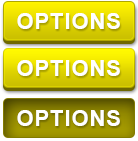
<style>
.page{position:relative;width:138px;height:141px}
.page>*{position:absolute;margin:0}
.t1{font:21.7px "Arial-BoldMT";letter-spacing:0.05em;color:#ffffff;text-transform:uppercase}
</style>
<div class="page">
<p class="t1" style="left:17px;top:13px;width:103px;height:16px">options</p>
<p class="t1" style="left:17px;top:60px;width:103px;height:16px">options</p>
<p class="t1" style="left:17px;top:110px;width:103px;height:16px">options</p>
</div>
